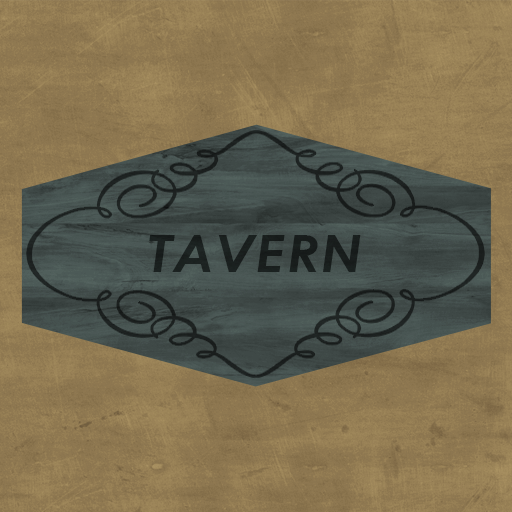
<style>
.page{position:relative;width:512px;height:512px}
.page>*{position:absolute;margin:0}
.t1{font:52px "CenturyGothic-BoldItalic";letter-spacing:0.025em;color:#191f1d;text-transform:uppercase;scale:1.07 1}
</style>
<div class="page">
<p class="t1" style="left:149px;top:235px;width:212px;height:37px">tavern</p>
</div>
